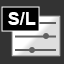
<style>
.page{position:relative;width:64px;height:64px;background:#333333}
.page>*{position:absolute;margin:0}
.t1{font:18px "Arial-BoldMT";color:#ffffff}
</style>
<div class="page">
<p class="t1" style="left:8px;top:12px;width:28px;height:13px">S/L</p>
</div>
